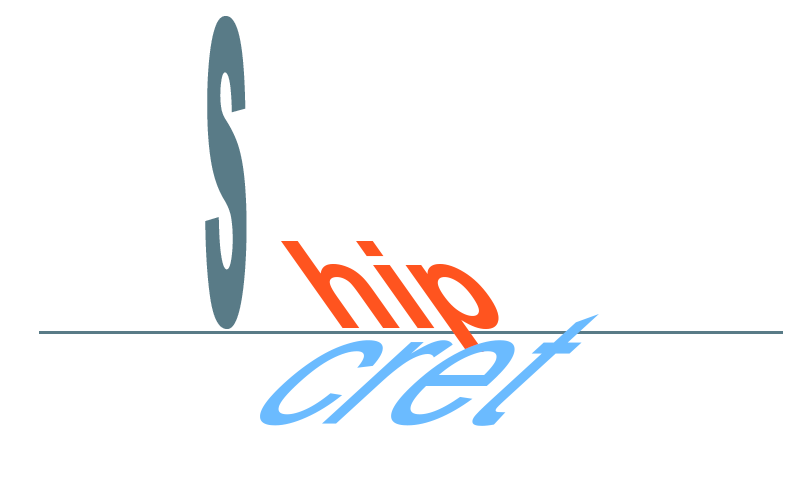
<style>
.page{position:relative;width:810px;height:500px;background:#ffffff}
.page>*{position:absolute;margin:0}
.t1{font:422.4px "Arial-Black";color:#597b87;scale:0.15 1}
.t2{font:148.6px "Arial-BoldMT";color:#ff541f;scale:0.82 1}
.t3{font:233.2px "ArialMT";color:#6bbbff;scale:0.68 1}
</style>
<div class="page">
<p class="t1" style="left:205px;top:16px;width:42px;height:313px;rotate:7deg">S</p>
<p class="t2" style="left:281px;top:241px;width:218px;height:111px">hip</p>
<p class="t3" style="left:260px;top:314px;width:339px;height:112px">cret</p>
</div>
